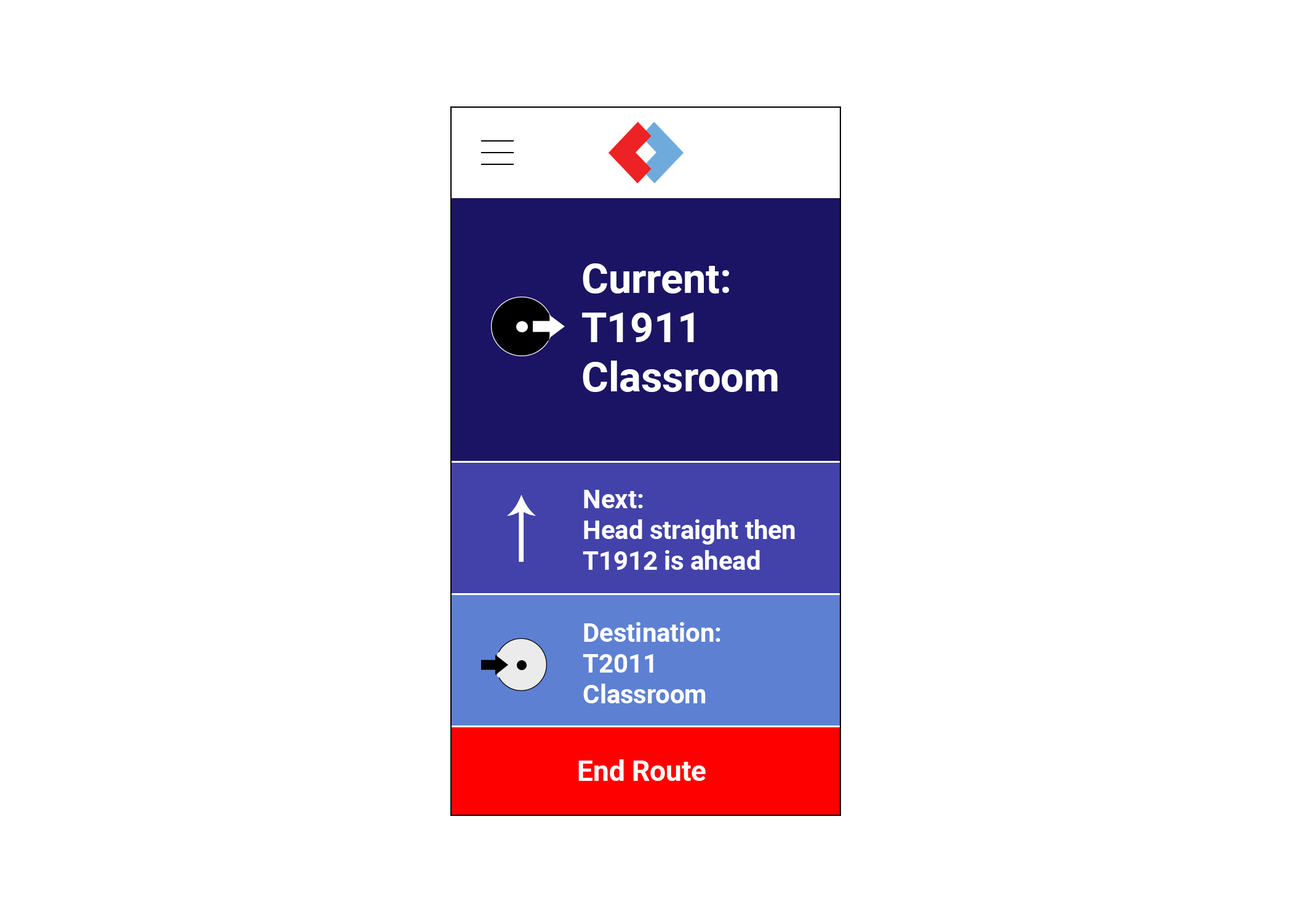
<style>
.page{position:relative;width:1292px;height:923px;background:#ffffff}
.page>*{position:absolute;margin:0}
.t1{font:41px "Roboto-Bold";color:#ffffff}
.t2{font:25.6px "Roboto-Bold";color:#ffffff}
.t3{font:28.2px "Roboto-Bold";color:#ffffff}
</style>
<div class="page">
<p class="t1" style="left:582px;top:263px;width:196px;height:129px">Current:<br>T1911<br>Classroom</p>
<p class="t2" style="left:583px;top:490px;width:212px;height:80px">Next:<br>Head straight then<br>T1912 is ahead</p>
<p class="t2" style="left:583px;top:622px;width:137px;height:81px">Destination:<br>T2011<br>Classroom</p>
<p class="t3" style="left:578px;top:759px;width:128px;height:22px">End Route</p>
</div>
